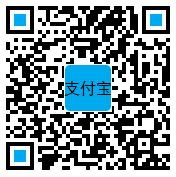
<style>
.page{position:relative;width:176px;height:177px;background:#ffffff}
.page>*{position:absolute;margin:0}
.t1{font:16px "STHeitiSC-Light";color:#000000}
</style>
<div class="page">
<p class="t1" style="left:64px;top:81px;width:47px;height:15px">支付宝</p>
</div>
